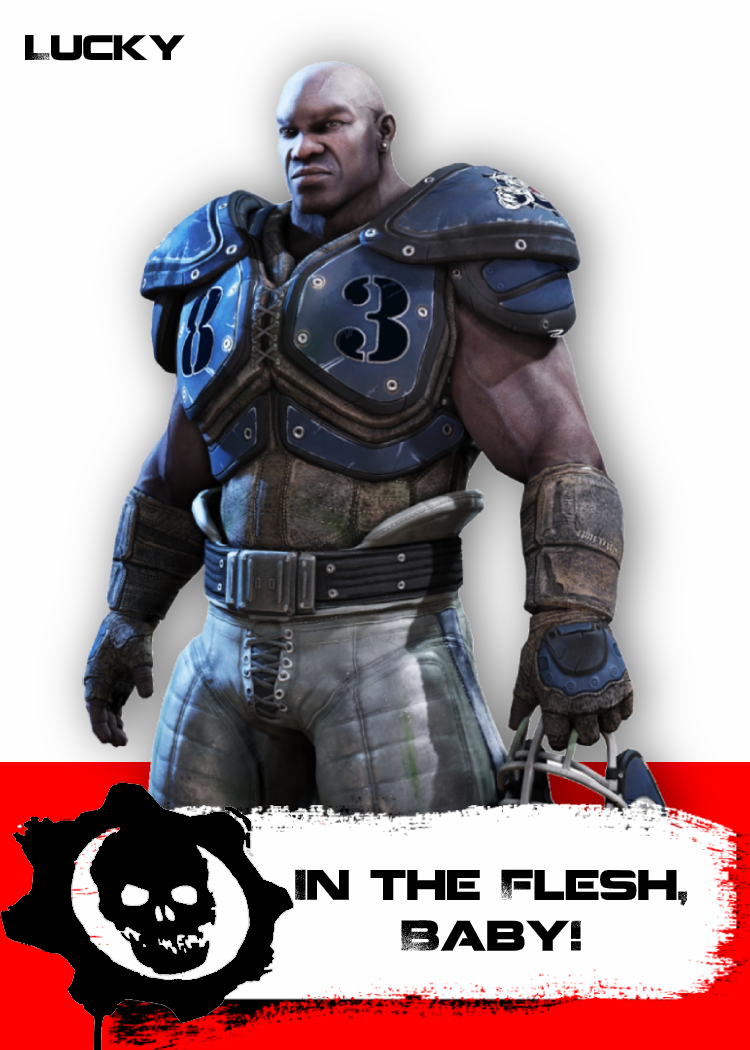
<style>
.page{position:relative;width:750px;height:1050px;background:#fefefe}
.page>*{position:absolute;margin:0}
.t1{font:35px "Coalition";color:#000000}
.t2{font:42.3px "Coalition";color:#000000}
</style>
<div class="page">
<p class="t1" style="left:25px;top:35px;width:160px;height:26px">Lucky</p>
<p class="t2" style="left:295px;top:869px;width:393px;height:82px;text-align:center">In the Flesh,<br>Baby!</p>
</div>
